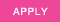
<style>
.page{position:relative;width:60px;height:22px;background:#ee4799}
.page>*{position:absolute;margin:0}
.t1{font:10px "HelveticaLTStd-Roman";letter-spacing:0.025em;color:#ffffff}
</style>
<div class="page">
<p class="t1" style="left:13px;top:7px;width:35px;height:8px">APPLY</p>
</div>
